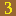
<style>
.page{position:relative;width:16px;height:16px;background:#996633}
.page>*{position:absolute;margin:0}
.t1{font:18px "Sylfaen";color:#f5e814}
</style>
<div class="page">
<p class="t1" style="left:5px;top:2px;width:7px;height:12px">3</p>
</div>
